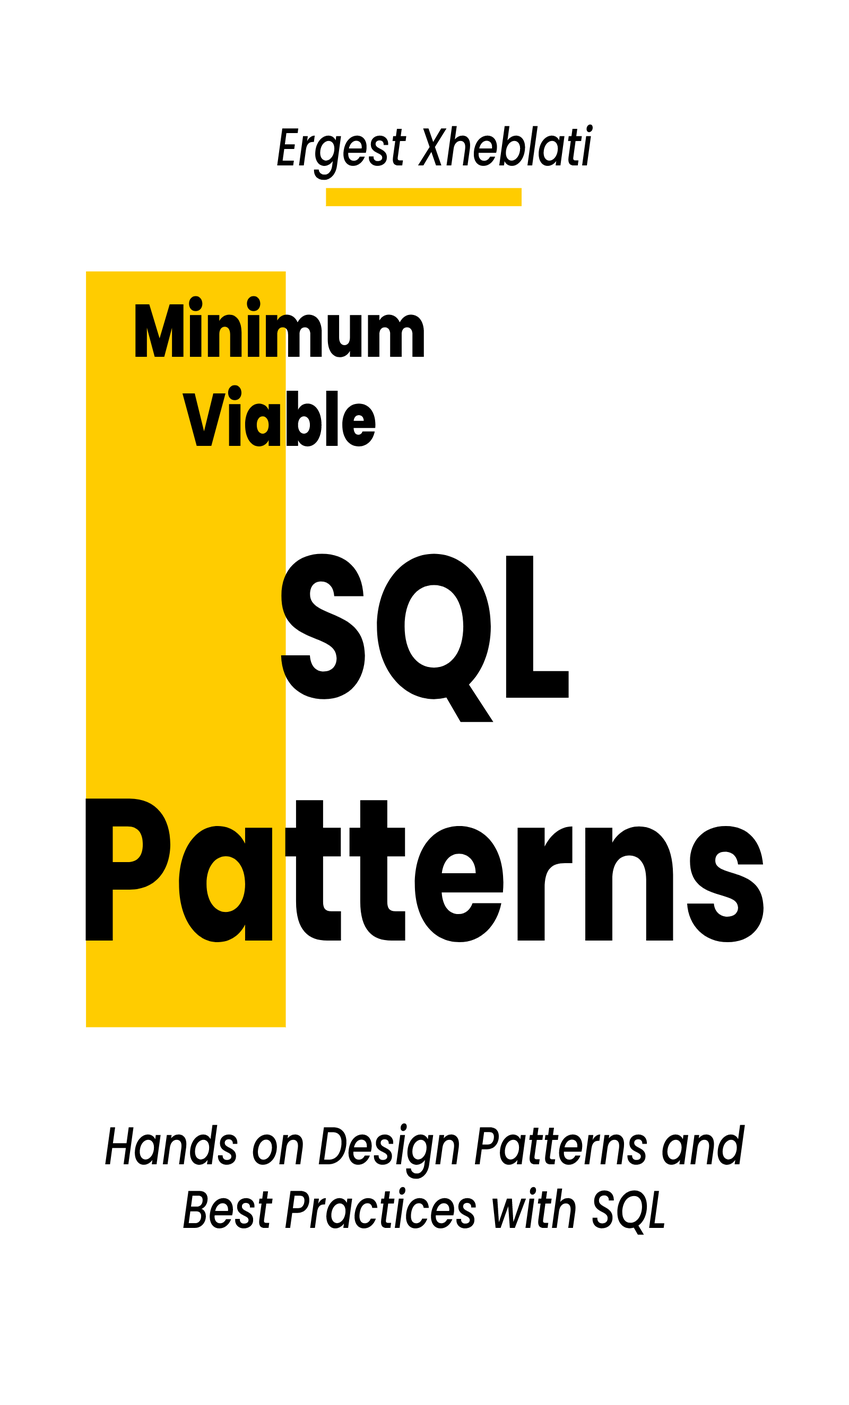
<style>
.page{position:relative;width:849px;height:1405px;background:#ffffff}
.page>*{position:absolute;margin:0}
.t1{font:53.2px "Poppins-MediumItalic";color:#000000;scale:0.78 1}
.t2{font:74.5px "Poppins-ExtraBold";color:#000000;scale:0.78 1}
.t3{font:202.3px "Poppins-Bold";color:#000000;scale:0.78 1}
</style>
<div class="page">
<p class="t1" style="left:277px;top:124px;width:315px;height:56px">Ergest Xheblati</p>
<p class="t2" style="left:135px;top:296px;width:289px;height:151px;text-align:center">Minimum Viable</p>
<p class="t3" style="left:85px;top:554px;width:678px;height:388px;text-align:center">SQL Patterns</p>
<p class="t1" style="left:105px;top:1123px;width:640px;height:112px;text-align:center">Hands on Design Patterns and Best Practices with SQL</p>
</div>
